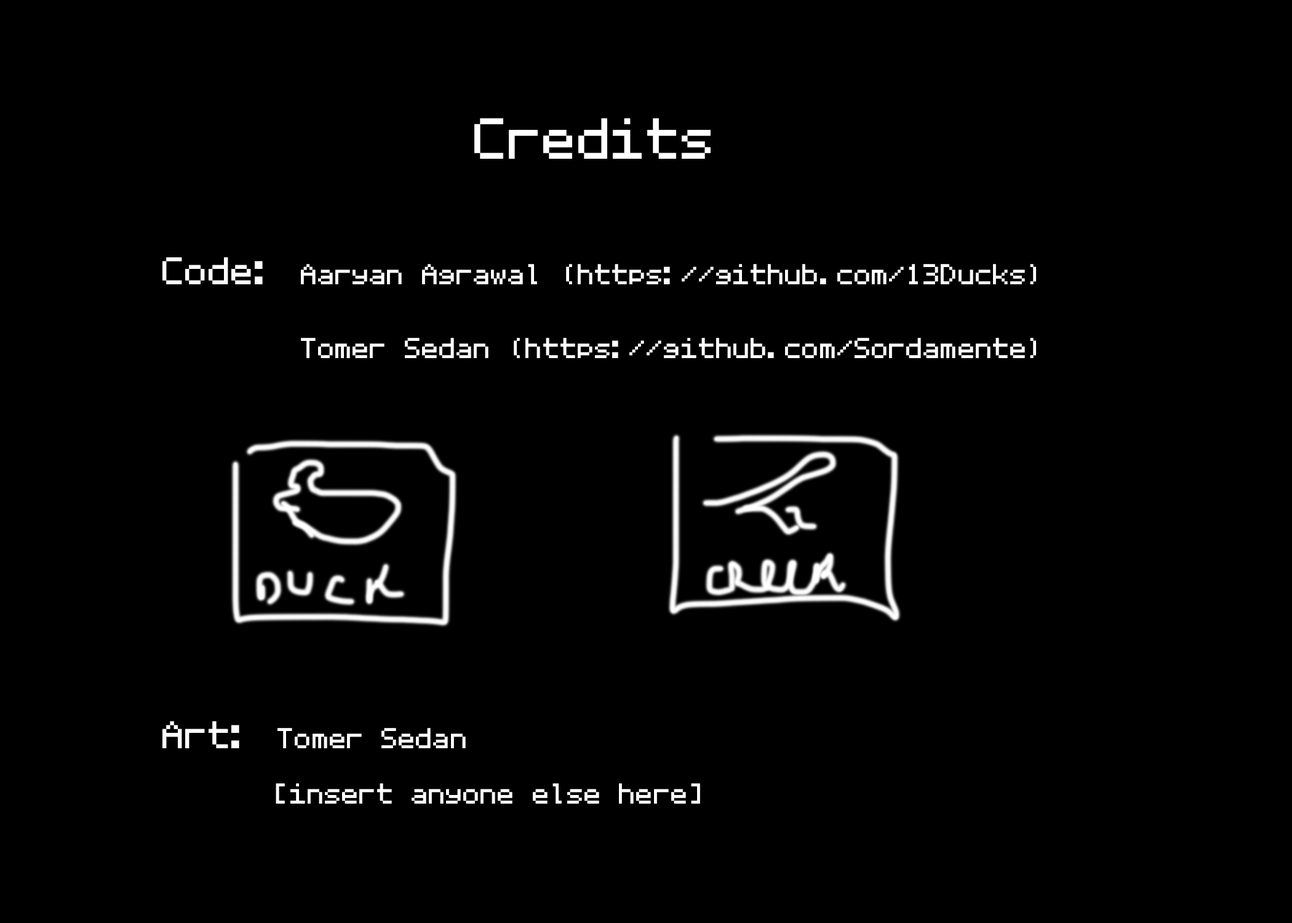
<style>
.page{position:relative;width:1292px;height:923px;background:#000000}
.page>*{position:absolute;margin:0}
.t1{font:92.3px "MozartNBP";color:#ffffff}
.t2{font:46.1px "MozartNBP";color:#ffffff}
.t3{font:61.5px "MozartNBP";color:#ffffff}
</style>
<div class="page">
<p class="t1" style="left:474px;top:118px;width:237px;height:41px">Credits</p>
<p class="t2" style="left:162px;top:257px;width:874px;height:101px"><span class="t3">Code: </span>Aaryan Agrawal (https://github.com/13Ducks)<br>      Tomer Sedan (https://github.com/Sordamente)</p>
<p class="t2" style="left:162px;top:721px;width:538px;height:83px"><span class="t3">Art: </span>Tomer Sedan<br>     [insert anyone else here]</p>
</div>
